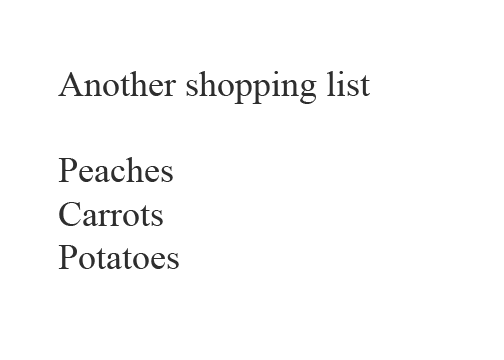
<style>
.page{position:relative;width:504px;height:360px;background:#ffffff}
.page>*{position:absolute;margin:0}
.t1{font:36px "TimesNewRomanPSMT";color:#2e2e2e}
</style>
<div class="page">
<p class="t1" style="left:58px;top:71px;width:312px;height:198px">Another shopping list<br><br>Peaches<br>Carrots<br>Potatoes</p>
</div>
